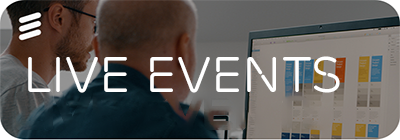
<style>
.page{position:relative;width:400px;height:140px}
.page>*{position:absolute;margin:0}
.t1{font:50px "EricssonCapitalTT-Regular";color:#ffffff}
</style>
<div class="page">
<p class="t1" style="left:28px;top:56px;width:312px;height:37px">LIVE EVENTS</p>
</div>
